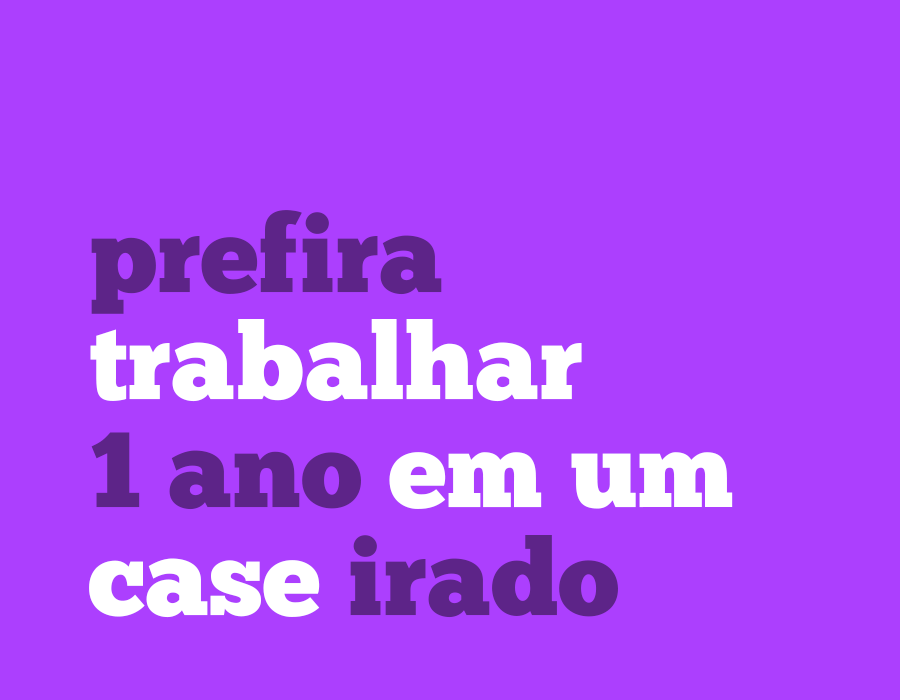
<style>
.page{position:relative;width:900px;height:700px;background:#ac3ffe}
.page>*{position:absolute;margin:0}
.t1{font:106.7px/107.8px "ChunkFive-Roman";color:#ffffff}
.t2{font:106.7px/107.8px "ChunkFive-Roman";color:#5d2488}
</style>
<div class="page">
<p class="t1" style="left:89px;top:210px;width:644px;height:408px"><span class="t2">prefira<br></span>trabalhar<br><span class="t2">1 ano</span> em um<br>case <span class="t2">irado</span></p>
</div>
